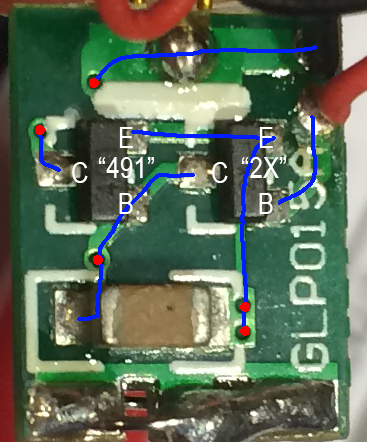
<style>
.page{position:relative;width:367px;height:442px}
.page>*{position:absolute;margin:0}
.t1{font:29px "ArialMT";color:#ffffff;scale:0.84 1}
</style>
<div class="page">
<p class="t1" style="left:119px;top:127px;width:14px;height:21px">E</p>
<p class="t1" style="left:259px;top:127px;width:14px;height:21px">E</p>
<p class="t1" style="left:98px;top:157px;width:56px;height:21px">“491”</p>
<p class="t1" style="left:241px;top:157px;width:45px;height:21px">“2X”</p>
<p class="t1" style="left:72px;top:162px;width:16px;height:21px">C</p>
<p class="t1" style="left:212px;top:162px;width:16px;height:21px">C</p>
<p class="t1" style="left:119px;top:193px;width:14px;height:21px">B</p>
<p class="t1" style="left:259px;top:193px;width:14px;height:21px">B</p>
</div>
